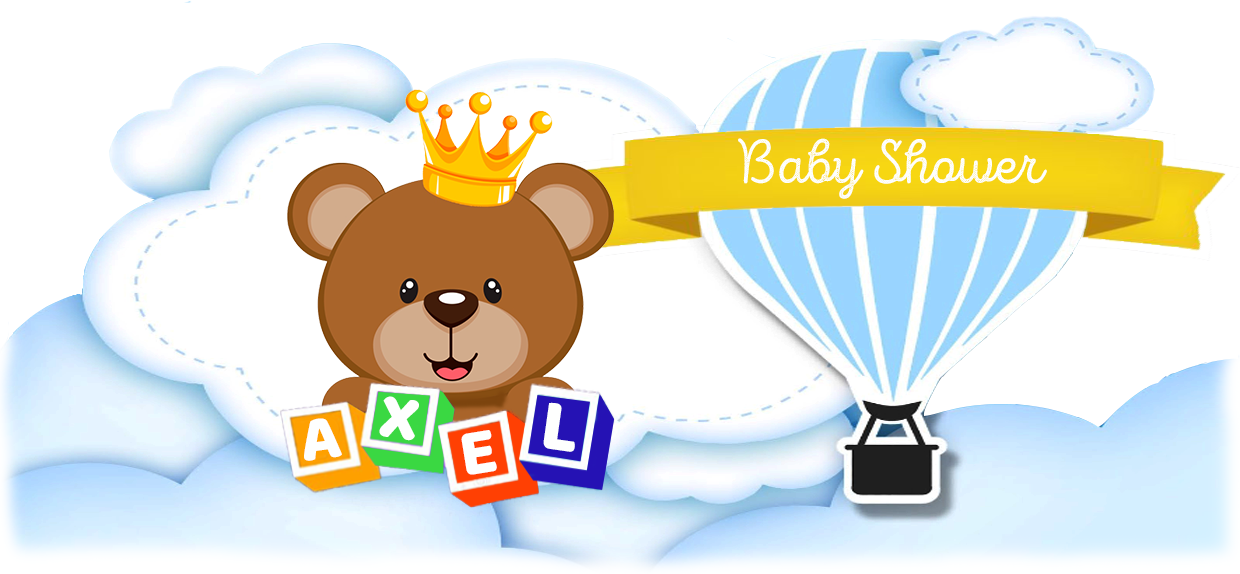
<style>
.page{position:relative;width:1240px;height:574px;background:#ffffff}
.page>*{position:absolute;margin:0}
.t1{font:62.1px "IntroScriptR-H2Base";color:#fefffe}
.t2{font:65.4px "Baloo";color:#fefffe}
.t3{font:74.5px "Baloo";color:#fefffe}
.t4{font:64.9px "Baloo";color:#fefffe}
.t5{font:68.1px "Baloo";color:#fefffe}
</style>
<div class="page">
<p class="t1" style="left:738px;top:138px;width:309px;height:61px">Baby Shower</p>
<p class="t2" style="left:379px;top:396px;width:40px;height:45px;rotate:8deg">X</p>
<p class="t3" style="left:543px;top:402px;width:32px;height:50px;rotate:8deg">L</p>
<p class="t4" style="left:304px;top:418px;width:38px;height:43px;rotate:-8deg">A</p>
<p class="t5" style="left:461px;top:430px;width:36px;height:45px;rotate:-9deg">E</p>
</div>
